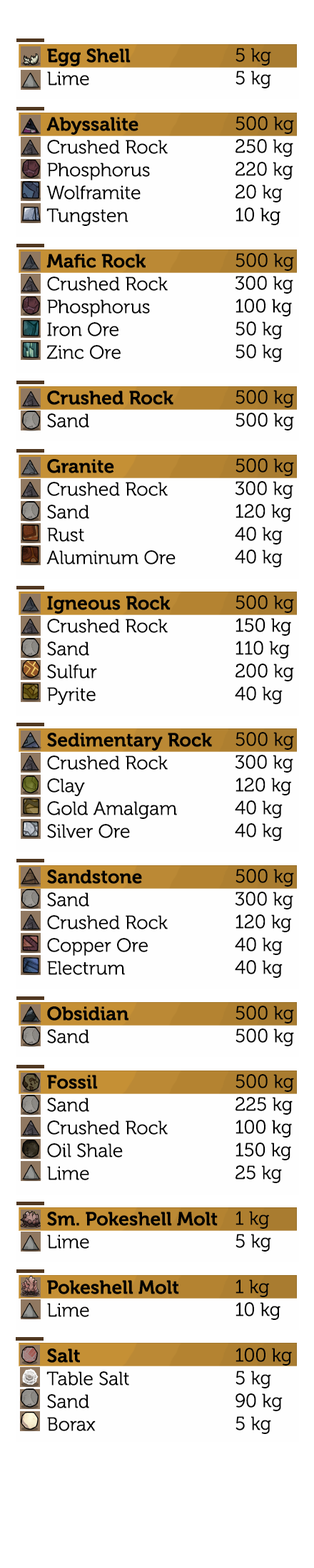
<style>
.page{position:relative;width:314px;height:1568px;background:#fefefe}
.page>*{position:absolute;margin:0}
.t1{font:19px "Museo-300";color:#000000}
.t2{font:19px "Museo-700";color:#000000}
</style>
<div class="page">
<p class="t1" style="left:46px;top:48px;width:171px;height:1383px"><span class="t2">Egg Shell<br></span>Lime<br><br><span class="t2">Abyssalite<br></span>Crushed Rock<br>Phosphorus<br>Wolframite<br>Tungsten<br><br><span class="t2">Mafic Rock<br></span>Crushed Rock<br>Phosphorus<br>Iron Ore<br>Zinc Ore<br><br><span class="t2">Crushed Rock<br></span>Sand<br><br><span class="t2">Granite<br></span>Crushed Rock<br>Sand<br>Rust<br>Aluminum Ore<br><br><span class="t2">Igneous Rock<br></span>Crushed Rock<br>Sand<br>Sulfur<br>Pyrite<br><br><span class="t2">Sedimentary Rock</span><br>Crushed Rock<br>Clay<br>Gold Amalgam<br>Silver Ore<br><br><span class="t2">Sandstone<br></span>Sand<br>Crushed Rock<br>Copper Ore<br>Electrum<br><br><span class="t2">Obsidian<br></span>Sand<br><br><span class="t2">Fossil<br></span>Sand<br>Crushed Rock<br>Oil Shale<br>Lime<br><br><span class="t2">Sm. Pokeshell Molt<br></span>Lime<br><span class="t2"><br>Pokeshell Molt<br></span>Lime<br><br><span class="t2">Salt<br></span>Table Salt<br>Sand<br>Borax</p>
<p class="t1" style="left:234px;top:48px;width:60px;height:1386px">5 kg<br>5 kg<br><br>500 kg<br>250 kg<br>220 kg<br>20 kg<br>10 kg<br><br>500 kg<br>300 kg<br>100 kg<br>50 kg<br>50 kg<br><br>500 kg<br>500 kg<br><br>500 kg<br>300 kg<br>120 kg<br>40 kg<br>40 kg<br><br>500 kg<br>150 kg<br>110 kg<br>200 kg<br>40 kg<br><br>500 kg<br>300 kg<br>120 kg<br>40 kg<br>40 kg<br><br>500 kg<br>300 kg<br>120 kg<br>40 kg<br>40 kg<br><br>500 kg<br>500 kg<br><br>500 kg<br>225 kg<br>100 kg<br>150 kg<br>25 kg<br><br>1 kg<br>5 kg<br><br>1 kg<br>10 kg<br><br>100 kg<br>5 kg<br>90 kg<br>5 kg</p>
</div>
